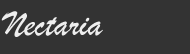
<style>
.page{position:relative;width:190px;height:54px;background:#333333}
.page>*{position:absolute;margin:0}
.t1{font:36px "BrushScriptMT";color:#eeeeee}
</style>
<div class="page">
<p class="t1" style="left:1px;top:11px;width:102px;height:26px">Nectaria</p>
</div>
